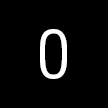
<style>
.page{position:relative;width:108px;height:108px;background:#000000}
.page>*{position:absolute;margin:0}
.t1{font:72px "OratorStd";color:#ffffff}
</style>
<div class="page">
<p class="t1" style="left:40px;top:29px;width:27px;height:50px">0</p>
</div>
